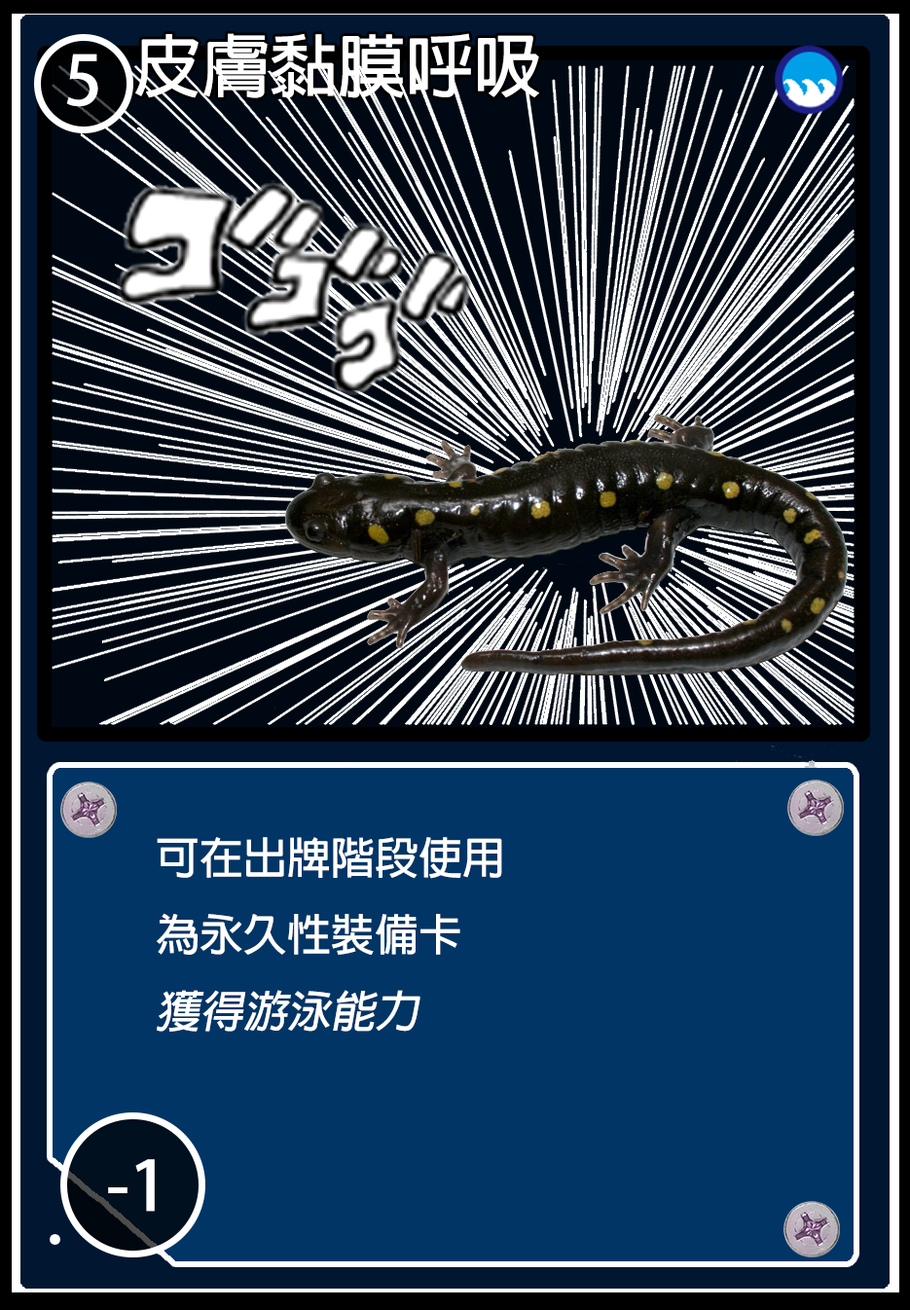
<style>
.page{position:relative;width:910px;height:1310px;background:#003566}
.page>*{position:absolute;margin:0}
.t1{font:68.1px "AdobeFanHeitiStd-Bold";color:#ffffff}
.t2{font:67.8px "AdobeFanHeitiStd-Bold";color:#ffffff}
.t3{font:43.8px "AdobeFanHeitiStd-Bold";color:#ffffff}
.t4{font:43.8px "AdobeFanHeitiStd-Bold";color:#ffffff;font-style:italic}
</style>
<div class="page">
<p class="t1" style="left:135px;top:33px;width:404px;height:65px">皮膚黏膜呼吸</p>
<p class="t2" style="left:66px;top:54px;width:32px;height:53px">5</p>
<p class="t3" style="left:157px;top:837px;width:345px;height:195px">可在出牌階段使用<br>為永久性裝備卡<br><span class="t4">獲得游泳能力</span></p>
<p class="t1" style="left:108px;top:1159px;width:47px;height:53px">-1</p>
</div>
